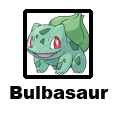
<style>
.page{position:relative;width:117px;height:117px;background:#ffffff}
.page>*{position:absolute;margin:0}
.t1{font:18px "Arial-Black";color:#050505}
</style>
<div class="page">
<p class="t1" style="left:10px;top:86px;width:99px;height:13px">Bulbasaur</p>
</div>
